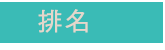
<style>
.page{position:relative;width:165px;height:50px;background:#3abbb6}
.page>*{position:absolute;margin:0}
.t1{font:24px "GothicMB101Pr6N-Light";letter-spacing:0.1em;color:#e4d7cb;font-weight:bold}
</style>
<div class="page">
<p class="t1" style="left:38px;top:9px;width:50px;height:24px">排名</p>
</div>
